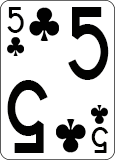
<style>
.page{position:relative;width:115px;height:160px;background:#ffffff}
.page>*{position:absolute;margin:0}
.t1{font:31.1px "CardCharacters";color:#020201;scale:0.95 1}
.t2{font:86.4px "CardCharacters";color:#020201;scale:0.83 1}
</style>
<div class="page">
<p class="t1" style="left:7px;top:7px;width:17px;height:26px">5</p>
<p class="t2" style="left:68px;top:7px;width:41px;height:73px">5</p>
<p class="t2" style="left:7px;top:80px;width:41px;height:73px;rotate:180deg">5</p>
<p class="t1" style="left:91px;top:127px;width:18px;height:26px;rotate:180deg">5</p>
</div>
